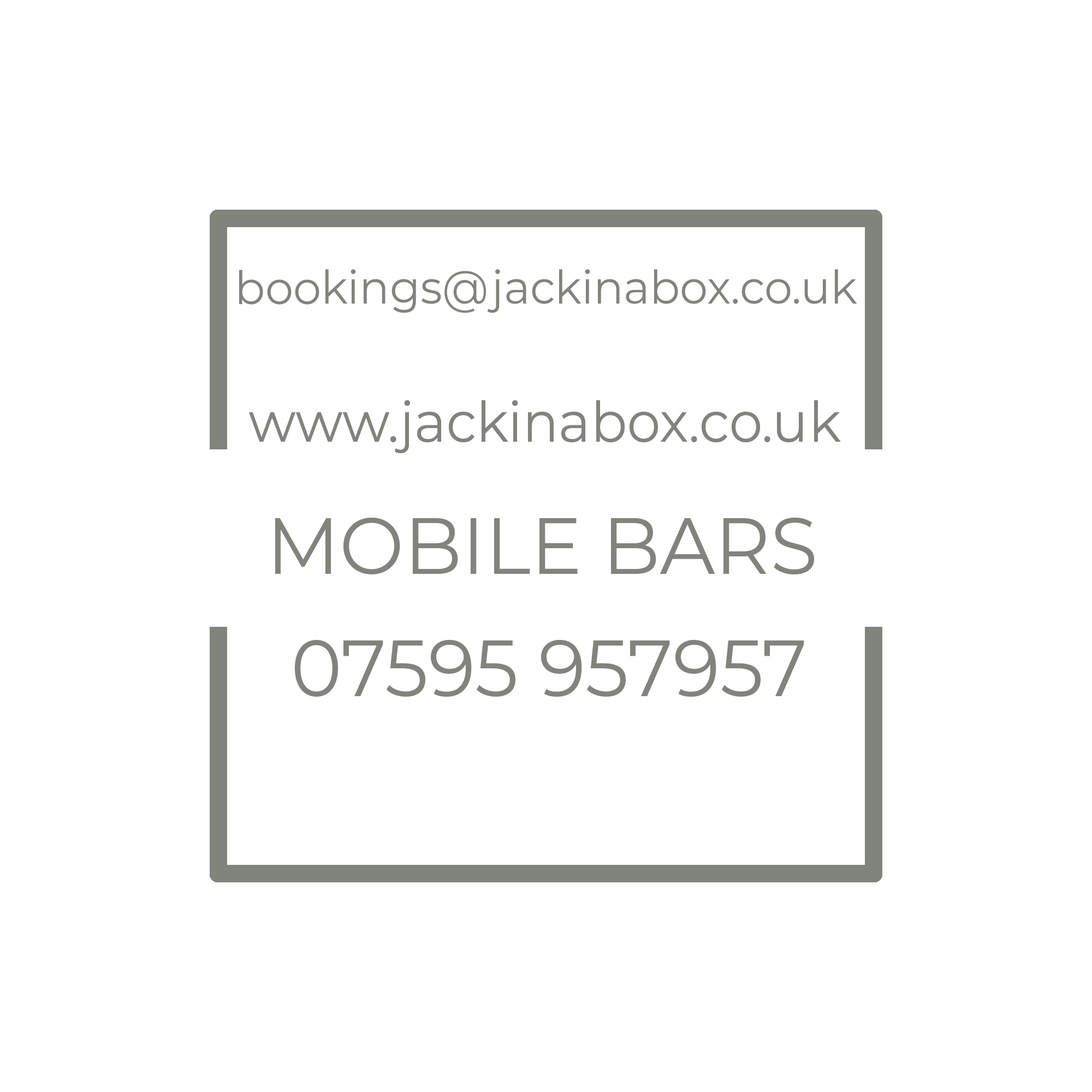
<style>
.page{position:relative;width:1092px;height:1092px;background:#ffffff}
.page>*{position:absolute;margin:0}
.t1{font:79.2px "Montserrat-Regular";color:#81847d;scale:0.97 1}
.t2{font:95.5px "Montserrat-Regular";color:#81847d;scale:0.97 1}
.t3{font:136.5px "Montserrat-Regular";color:#81847d;scale:0.97 1}
</style>
<div class="page">
<p class="t1" style="left:239px;top:269px;width:618px;height:44px">bookings@jackinabox.co.uk</p>
<p class="t2" style="left:249px;top:400px;width:592px;height:53px">www.jackinabox.co.uk</p>
<p class="t3" style="left:275px;top:518px;width:539px;height:57px">MOBILE BARS</p>
<p class="t3" style="left:295px;top:639px;width:509px;height:58px">07595 957957</p>
</div>
